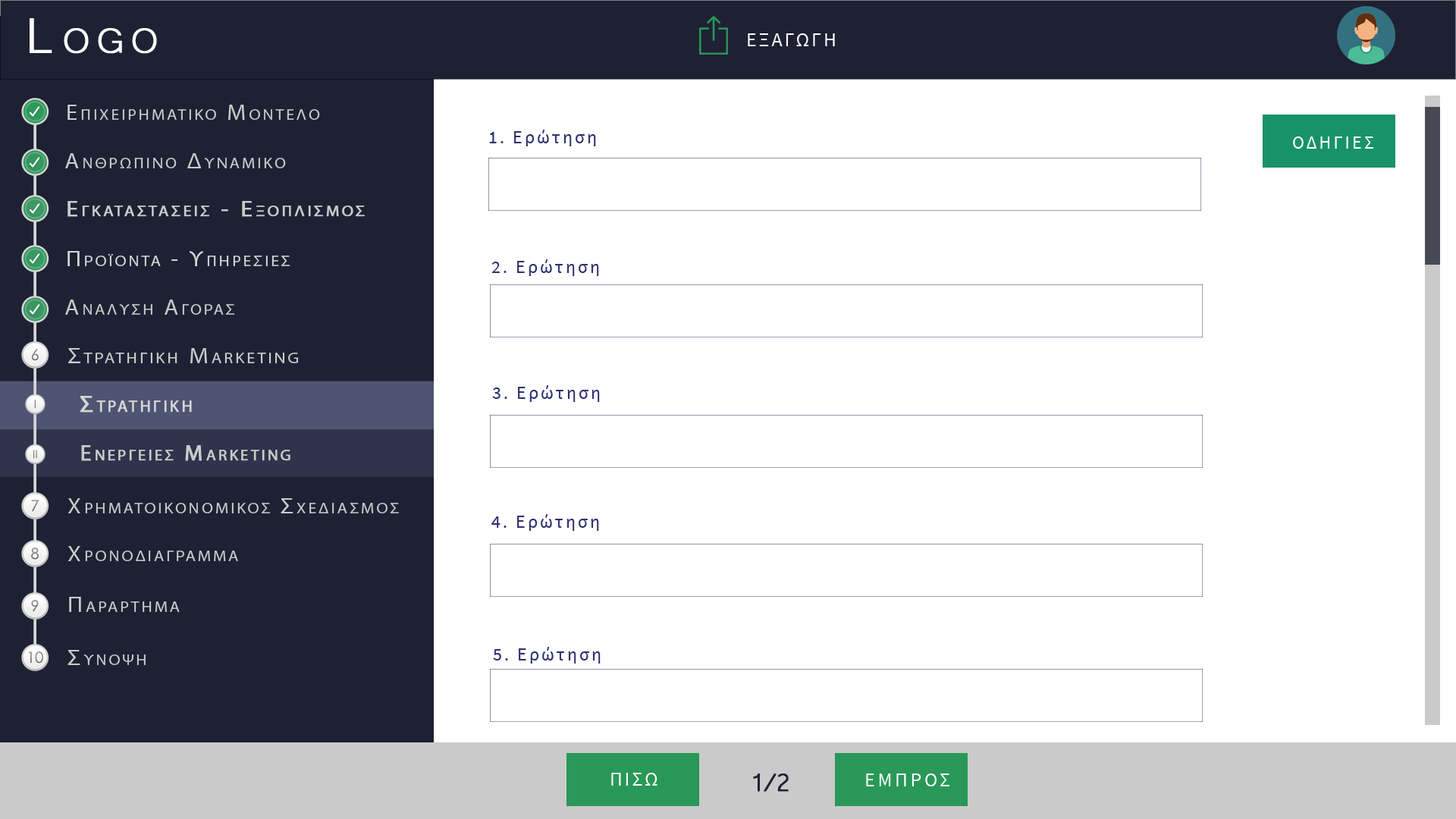
<style>
.page{position:relative;width:1456px;height:819px;background:#ffffff}
.page>*{position:absolute;margin:0}
.t1{font:63.7px "Microsoft-Yi-Baiti";letter-spacing:0.13em;color:#ffffff;font-variant:small-caps;font-weight:bold}
.t2{font:20px "SourceSansPro-Regular";letter-spacing:0.1em;color:#fefefe;text-transform:uppercase}
.t3{font:21.7px "MyriadPro-Regular";letter-spacing:0.13em;color:#cbcaca;font-variant:small-caps;scale:1.09 1}
.t4{font:23.4px "Microsoft-Yi-Baiti";letter-spacing:0.13em;color:#cbcaca;font-variant:small-caps;font-weight:bold}
.t5{font:18.2px "SourceSansPro-Regular";letter-spacing:0.13em;color:#2f2f70}
.t6{font:18.2px "SourceSansPro-Regular";letter-spacing:0.13em;color:#2f2f70;text-transform:uppercase}
.t7{font:18.2px "SourceSansPro-Regular";letter-spacing:0.13em;color:#ffffff;text-transform:uppercase}
.t8{font:21.7px/91px "MyriadPro-Regular";letter-spacing:0.13em;color:#cbcaca;font-variant:small-caps;font-weight:bold;scale:1.09 1}
.t9{font:23.4px/91px "Microsoft-Yi-Baiti";letter-spacing:0.13em;color:#cbcaca;font-variant:small-caps;font-weight:bold}
.t10{font:21.7px "MyriadPro-Regular";letter-spacing:0.13em;color:#d6d6d6;font-variant:small-caps;scale:1.09 1}
.t11{font:23.4px "Microsoft-Yi-Baiti";letter-spacing:0.13em;color:#d6d6d6;font-variant:small-caps;font-weight:bold}
.t12{font:15.3px "CenturyGothic";color:#838383}
.t13{font:22.2px "MyriadPro-Regular";letter-spacing:0.13em;color:#cbcaca;font-variant:small-caps;scale:1.09 1}
.t14{font:25.5px "Microsoft-Yi-Baiti";letter-spacing:0.13em;color:#cbcaca;font-variant:small-caps;font-weight:bold}
.t15{font:11.2px "CenturyGothic";color:#808080}
.t16{font:23.4px "MyriadPro-Regular";letter-spacing:0.13em;color:#d6d6d6;font-variant:small-caps;font-weight:bold}
.t17{font:11.2px "CenturyGothic";color:#828282}
.t18{font:22.3px "MyriadPro-Regular";letter-spacing:0.13em;color:#cbcaca;font-variant:small-caps;font-weight:bold}
.t19{font:15.3px "CenturyGothic";color:#888888}
.t20{font:15.3px "CenturyGothic";color:#8b8b8b}
.t21{font:23.7px "Microsoft-Yi-Baiti";letter-spacing:0.13em;color:#cbcaca;font-variant:small-caps;scale:1.09 1}
.t22{font:15.3px "CenturyGothic";color:#878787}
.t23{font:32.8px "Microsoft-Yi-Baiti";letter-spacing:-0.1em;color:#1e2133;font-weight:bold}
.t24{font:20px "SourceSansPro-Regular";letter-spacing:0.13em;color:#fefefe;text-transform:uppercase}
</style>
<div class="page">
<p class="t1" style="left:30px;top:18px;width:127px;height:36px">Logo</p>
<p class="t2" style="left:748px;top:33px;width:87px;height:13px">εξαγωγη</p>
<p class="t3" style="left:67px;top:105px;width:253px;height:15px"><span class="t4">   </span>Επιχειρηματικο Μοντελο</p>
<p class="t5" style="left:489px;top:130px;width:107px;height:16px"><span class="t6">1. </span>Ερώτηση</p>
<p class="t7" style="left:1293px;top:136px;width:81px;height:13px">Οδηγιεσ</p>
<p class="t3" style="left:65px;top:153px;width:221px;height:15px"><span class="t4">   </span>Ανθρωπινο Δυναμικο</p>
<p class="t8" style="left:67px;top:201px;width:298px;height:16px"><span class="t9">   </span>Εγκαταστασεισ - Εξοπλισμοσ<br><br><span class="t9">Equipment</span></p>
<p class="t10" style="left:67px;top:251px;width:223px;height:15px"><span class="t11">   </span>Προϊοντα - Υπηρεσιεσ</p>
<p class="t5" style="left:491px;top:259px;width:108px;height:17px"><span class="t6">2. </span>Ερώτηση</p>
<p class="t3" style="left:65px;top:300px;width:170px;height:15px"><span class="t4">   </span>Αναλυση Αγορασ</p>
<p class="t12" style="left:31px;top:349px;width:8px;height:12px">6</p>
<p class="t13" style="left:68px;top:348px;width:230px;height:15px"><span class="t14">   </span>Στρατηγικη Marketing</p>
<p class="t5" style="left:492px;top:385px;width:108px;height:17px"><span class="t6">3. </span>Ερώτηση</p>
<p class="t15" style="left:34px;top:400px;width:2px;height:9px">I</p>
<p class="t16" style="left:80px;top:396px;width:112px;height:17px">Στρατηγικη</p>
<p class="t17" style="left:33px;top:450px;width:4px;height:9px">II</p>
<p class="t18" style="left:81px;top:445px;width:209px;height:16px">Ενεργειεσ Marketing</p>
<p class="t19" style="left:31px;top:500px;width:8px;height:12px">7</p>
<p class="t3" style="left:67px;top:498px;width:332px;height:15px"><span class="t14">   </span>Χρηματοικονομικοσ Σχεδιασμοσ</p>
<p class="t5" style="left:491px;top:514px;width:108px;height:17px"><span class="t6">4. </span>Ερώτηση</p>
<p class="t3" style="left:67px;top:546px;width:171px;height:15px"><span class="t14">   </span>Χρονοδιαγραμμα</p>
<p class="t20" style="left:31px;top:548px;width:8px;height:12px">8</p>
<p class="t12" style="left:31px;top:600px;width:8px;height:12px">9</p>
<p class="t3" style="left:69px;top:597px;width:111px;height:15px"><span class="t21">   </span>Παραρτημα</p>
<p class="t22" style="left:28px;top:651px;width:15px;height:13px">10</p>
<p class="t3" style="left:67px;top:650px;width:79px;height:15px"><span class="t21">   </span>Συνοψη</p>
<p class="t5" style="left:493px;top:647px;width:108px;height:17px"><span class="t6">5. </span>Ερώτηση</p>
<p class="t2" style="left:611px;top:773px;width:46px;height:13px">Πισω</p>
<p class="t23" style="left:753px;top:773px;width:36px;height:19px">1/2</p>
<p class="t24" style="left:866px;top:773px;width:83px;height:13px">εμπροσ</p>
</div>
